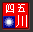
<style>
.page{position:relative;width:33px;height:32px;background:#f20000}
.page>*{position:absolute;margin:0}
.t1{font:10.4px "SimSun";color:#ffffff}
.t2{font:11.7px "SimSun";color:#ffffff}
</style>
<div class="page">
<p class="t1" style="left:6px;top:4px;width:19px;height:9px">四五</p>
<p class="t2" style="left:16px;top:15px;width:11px;height:12px">川</p>
</div>
